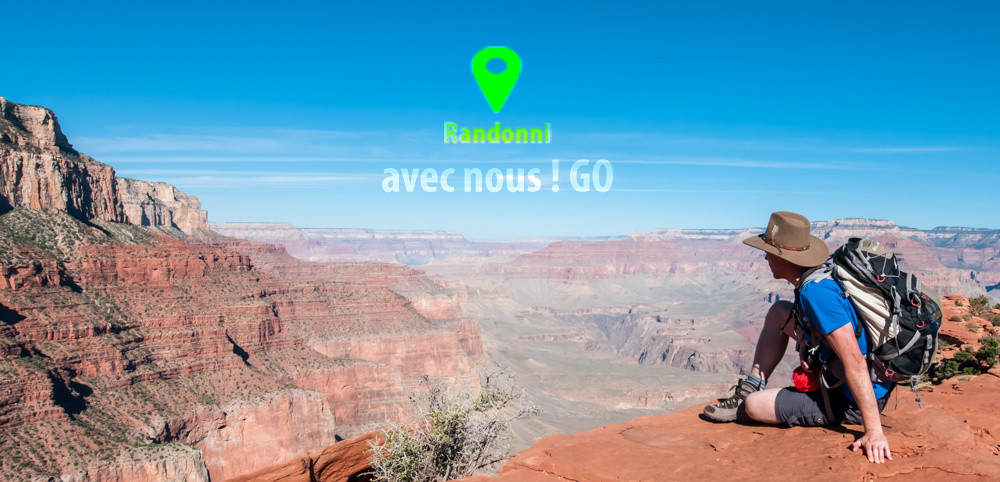
<style>
.page{position:relative;width:1000px;height:482px}
.page>*{position:absolute;margin:0}
.t1{font:48px "MyriadPro-BoldCond"}
</style>
<div class="page">
<p class="t1" style="left:382px;top:159px;width:231px;height:34px">avec nous ! GO</p>
</div>
